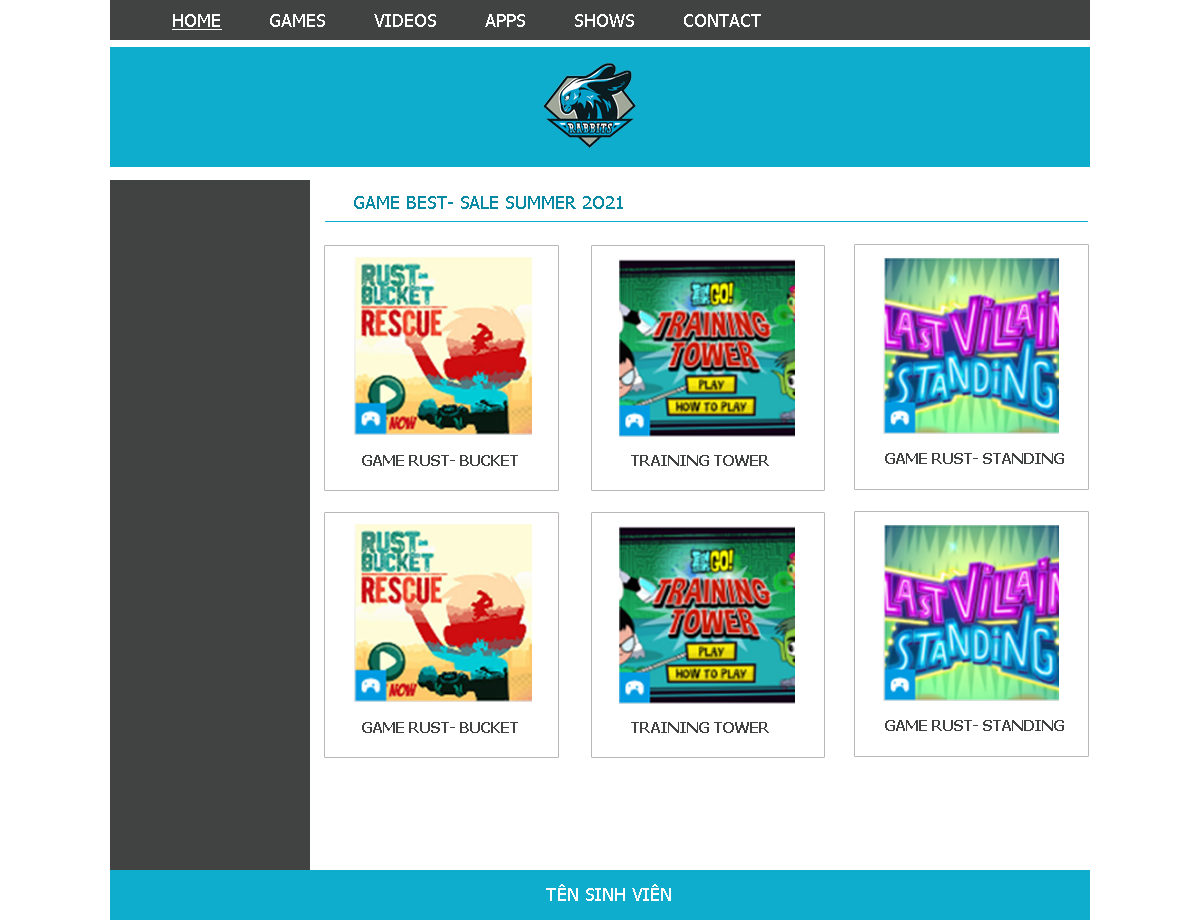
<style>
.page{position:relative;width:1200px;height:920px;background:#ffffff}
.page>*{position:absolute;margin:0}
.t1{font:18px "Tahoma";color:#ffffff}
.t2{font:18px "Tahoma";color:#ffffff;text-decoration:underline}
.t3{font:18px "Tahoma";color:#0789a4}
.t4{font:15px "Tahoma-Bold";color:#414343}
</style>
<div class="page">
<p class="t1" style="left:172px;top:14px;width:589px;height:16px"><span class="t2">HOME</span>        GAMES        VIDEOS        APPS        SHOWS        CONTACT</p>
<p class="t3" style="left:354px;top:196px;width:269px;height:13px">GAME BEST- SALE SUMMER 2O21</p>
<p class="t4" style="left:362px;top:455px;width:156px;height:11px">GAME RUST- BUCKET</p>
<p class="t4" style="left:631px;top:455px;width:138px;height:11px">TRAINING TOWER</p>
<p class="t4" style="left:885px;top:453px;width:179px;height:11px">GAME RUST- STANDING</p>
<p class="t4" style="left:362px;top:722px;width:156px;height:11px">GAME RUST- BUCKET</p>
<p class="t4" style="left:631px;top:722px;width:138px;height:11px">TRAINING TOWER</p>
<p class="t4" style="left:885px;top:720px;width:179px;height:11px">GAME RUST- STANDING</p>
<p class="t1" style="left:546px;top:884px;width:125px;height:17px">TÊN SINH VIÊN</p>
</div>
